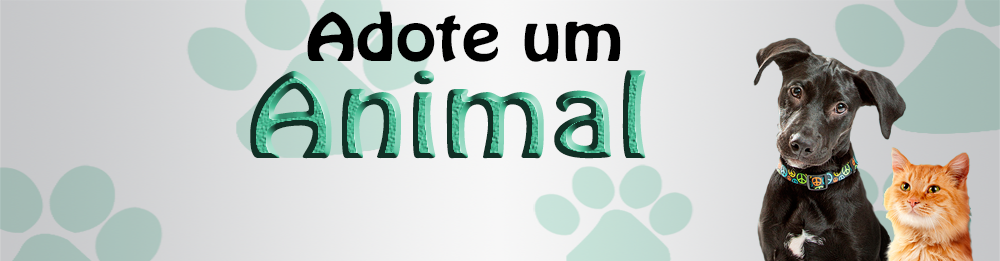
<style>
.page{position:relative;width:1000px;height:261px}
.page>*{position:absolute;margin:0}
.t1{font:58.4px "HoboStd";color:#000000;scale:1.25 1}
.t2{font:102.8px "HoboStd";scale:1.25 1}
</style>
<div class="page">
<p class="t1" style="left:307px;top:11px;width:314px;height:51px">Adote um</p>
<p class="t2" style="left:250px;top:70px;width:396px;height:89px">Animal</p>
</div>
